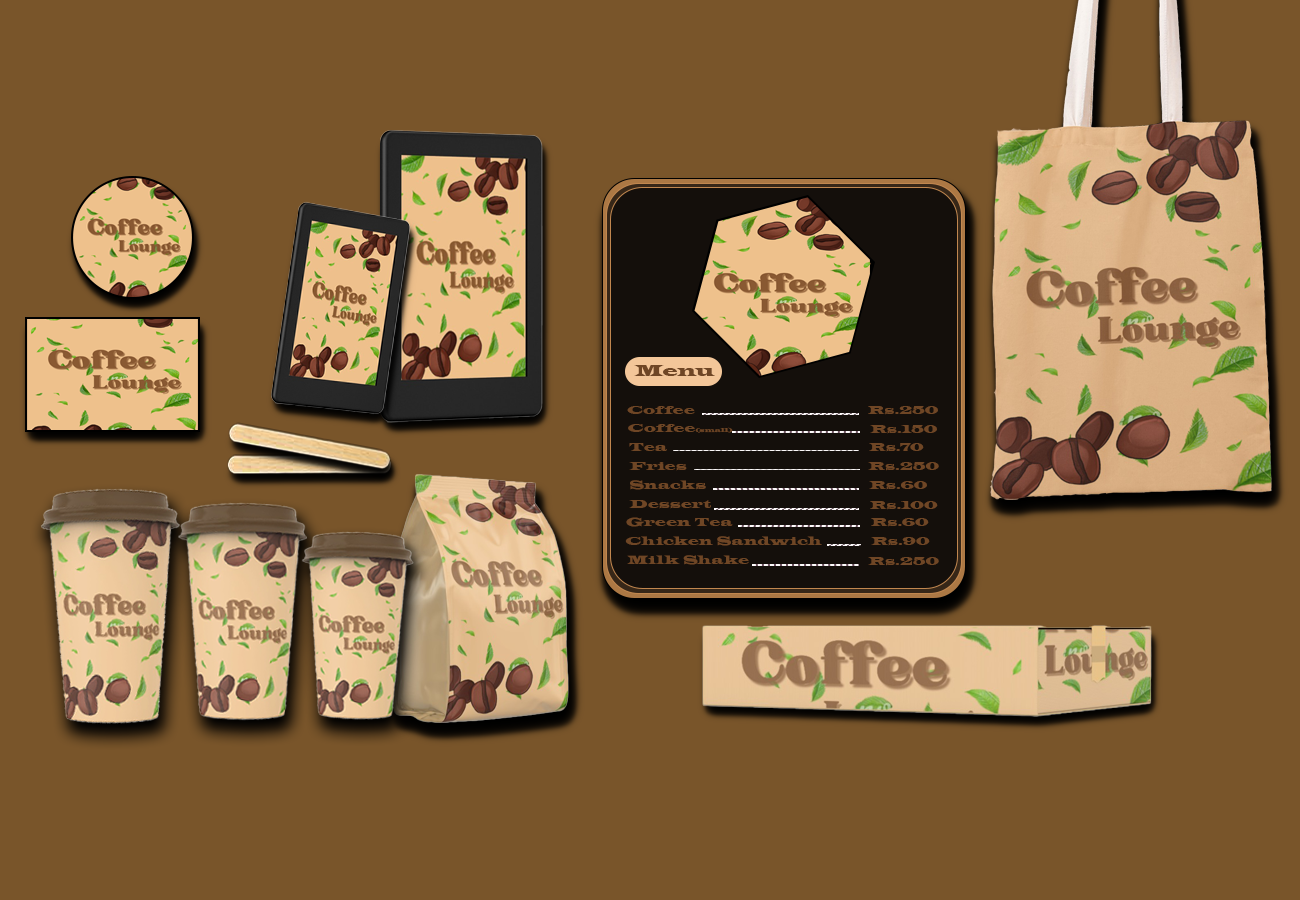
<style>
.page{position:relative;width:1300px;height:900px;background:#79552a}
.page>*{position:absolute;margin:0}
.t1{font:16.9px "LatinWide";color:#6f4625}
.t2{font:12.3px "LatinWide";color:#6f4625}
.t3{font:12.5px "LatinWide";color:#6f4625;scale:0.89 1}
.t4{font:6.1px "LatinWide";color:#6f4625}
</style>
<div class="page">
<p class="t1" style="left:634px;top:365px;width:81px;height:11px">Menu</p>
<p class="t2" style="left:627px;top:406px;width:68px;height:8px">Coffee</p>
<p class="t3" style="left:868px;top:406px;width:70px;height:9px">Rs.250</p>
<p class="t2" style="left:628px;top:424px;width:67px;height:8px">Coffee</p>
<p class="t3" style="left:870px;top:425px;width:67px;height:9px">Rs.150</p>
<p class="t4" style="left:695px;top:427px;width:38px;height:6px">(small)</p>
<p class="t2" style="left:629px;top:443px;width:38px;height:8px">Tea</p>
<p class="t3" style="left:869px;top:443px;width:55px;height:9px">Rs.70</p>
<p class="t2" style="left:629px;top:462px;width:58px;height:9px">Fries</p>
<p class="t3" style="left:868px;top:462px;width:71px;height:9px">Rs.250</p>
<p class="t2" style="left:630px;top:480px;width:76px;height:10px">Snacks</p>
<p class="t3" style="left:869px;top:481px;width:58px;height:9px">Rs.60</p>
<p class="t2" style="left:629px;top:500px;width:82px;height:9px">Dessert</p>
<p class="t3" style="left:870px;top:501px;width:68px;height:9px">Rs.100</p>
<p class="t2" style="left:626px;top:517px;width:107px;height:10px">Green Tea</p>
<p class="t3" style="left:871px;top:518px;width:58px;height:9px">Rs.60</p>
<p class="t2" style="left:625px;top:536px;width:197px;height:10px">Chicken Sandwich</p>
<p class="t3" style="left:871px;top:537px;width:59px;height:9px">Rs.90</p>
<p class="t2" style="left:627px;top:555px;width:122px;height:10px">Milk Shake</p>
<p class="t3" style="left:868px;top:557px;width:71px;height:9px">Rs.250</p>
</div>
